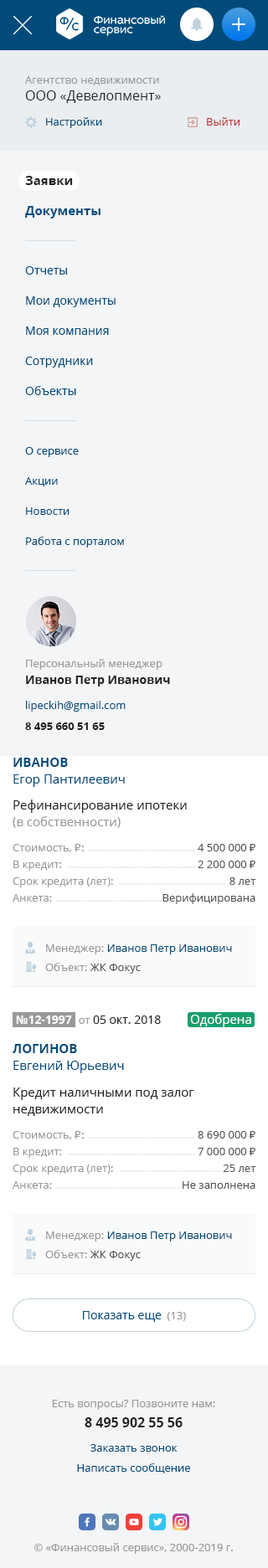
<style>
.page{position:relative;width:268px;height:1568px;background:#f3f5f6}
.page>*{position:absolute;margin:0}
.t1{font:10.9px "OpenSans";color:#999999}
.t2{font:13.4px/16.7px "OpenSans";color:#222222}
.t3{font:10.9px "OpenSans";color:#004b7a}
.t4{font:10.9px "OpenSans";color:#be3030}
.t5{font:12.6px/30.1px "OpenSans-Bold";color:#004b7a}
.t6{font:12.6px/30.1px "OpenSans-Bold";color:#222222}
.t7{font:11.7px/30.1px "OpenSans";color:#004b7a}
.t8{font:11.7px/29.3px "OpenSans";color:#004b7a}
.t9{font:10.9px/30.1px "OpenSans";color:#004b7a}
.t10{font:11.7px/16.7px "OpenSans-Bold";color:#222222}
.t11{font:10.9px "OpenSans-Bold";color:#222222}
.t12{font:12.6px/16.7px "OpenSans";color:#004b7a}
.t13{font:12.6px/16.7px "OpenSans-Bold";color:#004b7a;text-transform:uppercase}
.t14{font:10.9px/16.7px "OpenSans";color:#e1e1e1}
.t15{font:12.6px "OpenSans";color:#222222}
.t16{font:12.6px/16.7px "OpenSans";color:#999999}
.t17{font:10.9px/25.1px "OpenSans";color:#999999}
.t18{font:10.9px/25.1px "Tahoma";color:#999999}
.t19{font:10.9px/25.1px "OpenSans";color:#e1e1e1}
.t20{font:10.9px/16.7px "OpenSans";color:#999999}
.t21{font:10.9px/16.7px "OpenSans";color:#555555}
.t22{font:10.9px/16.7px "Tahoma";color:#555555}
.t23{font:10.9px "OpenSans";color:#555555}
.t24{font:12.6px "OpenSans";color:#ffffff}
.t25{font:12.6px/16.7px "OpenSans";color:#222222}
.t26{font:11.7px "OpenSans";color:#004b7a}
.t27{font:10.9px/20.1px "OpenSans";color:#999999}
.t28{font:13.4px/20.1px "OpenSans-Bold";color:#222222}
.t29{font:10.9px/20.1px "OpenSans";color:#004b7a}
</style>
<div class="page">
<p class="t1" style="left:25px;top:76px;width:136px;height:27px">Агентство недвижимости<br><span class="t2">ООО «Девелопмент»</span></p>
<p class="t3" style="left:46px;top:117px;width:56px;height:11px">Настройки</p>
<p class="t4" style="left:207px;top:117px;width:32px;height:9px">Выйти</p>
<p class="t5" style="left:25px;top:176px;width:75px;height:42px"><span class="t6">Заявки             <br></span>Документы</p>
<p class="t7" style="left:25px;top:266px;width:91px;height:129px"><span class="t8">Отчеты<br></span>Мои документы<br>Моя компания<br>Сотрудники<br>Объекты</p>
<p class="t9" style="left:25px;top:447px;width:99px;height:101px">О сервисе<br>Акции<br>Новости<br>Работа с порталом</p>
<p class="t1" style="left:26px;top:659px;width:144px;height:27px">Персональный менеджер<br><span class="t10">Иванов Петр Иванович</span></p>
<p class="t3" style="left:26px;top:701px;width:100px;height:11px">lipeckih@gmail.com</p>
<p class="t11" style="left:25px;top:722px;width:80px;height:8px">8 495 660 51 65</p>
<p class="t12" style="left:13px;top:758px;width:112px;height:29px"><span class="t13">Иванов <br></span>Егор Пантилеевич</p>
<p class="t14" style="left:13px;top:799px;width:213px;height:103px"><span class="t15">Рефинансирование ипотеки <br></span><span class="t16">(в собственности)<br></span><span class="t17">Стоимость, </span><span class="t18">₽:</span><span class="t19"> .....................................<br></span><span class="t20">В кредит: </span> ............................................<br><span class="t20">Срок кредита (лет): </span> .....................................<br><span class="t20">Анкета:</span> .....................................</p>
<p class="t21" style="left:162px;top:844px;width:94px;height:60px;text-align:right">4 500 000 <span class="t22">₽     <br></span>2 200 000 <span class="t22">₽<br></span>8 лет<br>Верифицирована</p>
<p class="t3" style="left:46px;top:944px;width:186px;height:10px"><span class="t1">Менеджер: </span>Иванов Петр Иванович</p>
<p class="t23" style="left:45px;top:963px;width:96px;height:11px"><span class="t1">Объект: </span>ЖК Фокус</p>
<p class="t24" style="left:190px;top:1014px;width:61px;height:13px">Одобрена</p>
<p class="t12" style="left:13px;top:1044px;width:111px;height:29px"><span class="t13">Логинов <br></span>Евгений Юрьевич</p>
<p class="t14" style="left:13px;top:1087px;width:207px;height:102px"><span class="t15">Кредит наличными под залог </span><span class="t25">недвижимости<br></span><span class="t17">Стоимость, </span><span class="t18">₽:</span><span class="t19"> .....................................<br></span><span class="t20">В кредит: </span> ............................................<br><span class="t20">Срок кредита (лет): </span> ...................................<br><span class="t20">Анкета:</span> ...........................................</p>
<p class="t21" style="left:183px;top:1131px;width:73px;height:58px;text-align:right">8 690 000 <span class="t22">₽     <br></span>7 000 000 <span class="t22">₽<br></span>25 лет<br>Не заполнена</p>
<p class="t3" style="left:46px;top:1231px;width:186px;height:11px"><span class="t1">Менеджер: </span>Иванов Петр Иванович</p>
<p class="t23" style="left:45px;top:1250px;width:96px;height:11px"><span class="t1">Объект: </span>ЖК Фокус</p>
<p class="t26" style="left:83px;top:1311px;width:103px;height:11px">Показать еще <span class="t1"> (13)</span></p>
<p class="t27" style="left:52px;top:1400px;width:163px;height:27px;text-align:center">Есть вопросы? Позвоните нам:<br><span class="t28">8 495 902 55 56</span></p>
<p class="t29" style="left:77px;top:1444px;width:113px;height:29px;text-align:center">Заказать звонок          <br>Написать сообщение</p>
<p class="t1" style="left:34px;top:1543px;width:199px;height:11px">© «Финансовый сервис», 2000-2019 г.</p>
</div>
